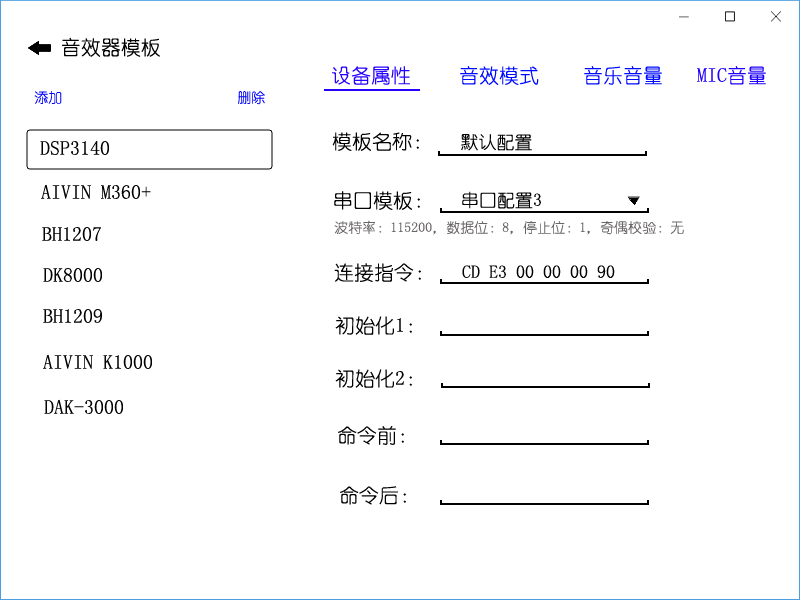
<style>
.page{position:relative;width:800px;height:600px;background:#ffffff}
.page>*{position:absolute;margin:0}
.t1{font:20px "YouYuan";color:#010101}
.t2{font:20px "YouYuan";color:#2501ff}
.t3{font:20px "YouYuan";color:#000cff}
.t4{font:20px "YouYuan";color:#1f01fd}
.t5{font:14px "YouYuan";color:#0000fe}
.t6{font:18px "YouYuan";color:#010101}
.t7{font:14px "YouYuan";color:#696666}
</style>
<div class="page">
<p class="t1" style="left:62px;top:37px;width:98px;height:20px">音效器模板</p>
<p class="t2" style="left:332px;top:66px;width:78px;height:19px">设备属性</p>
<p class="t3" style="left:460px;top:66px;width:79px;height:19px">音效模式</p>
<p class="t3" style="left:584px;top:66px;width:78px;height:19px">音乐音量</p>
<p class="t4" style="left:697px;top:66px;width:69px;height:19px">MIC音量</p>
<p class="t5" style="left:34px;top:91px;width:28px;height:13px">添加</p>
<p class="t5" style="left:238px;top:91px;width:27px;height:14px">删除</p>
<p class="t1" style="left:332px;top:132px;width:87px;height:19px">模板名称：</p>
<p class="t6" style="left:461px;top:134px;width:71px;height:17px">默认配置</p>
<p class="t1" style="left:40px;top:141px;width:69px;height:14px">DSP3140</p>
<p class="t1" style="left:41px;top:184px;width:110px;height:15px">AIVIN M360+</p>
<p class="t1" style="left:334px;top:191px;width:86px;height:19px">串口模板：</p>
<p class="t6" style="left:462px;top:191px;width:79px;height:18px">串口配置3</p>
<p class="t7" style="left:334px;top:220px;width:350px;height:15px">波特率：115200，数据位：8，停止位：1，奇偶校验：无</p>
<p class="t1" style="left:42px;top:227px;width:59px;height:14px">BH1207</p>
<p class="t1" style="left:43px;top:268px;width:59px;height:14px">DK8000</p>
<p class="t1" style="left:334px;top:263px;width:87px;height:19px">连接指令：</p>
<p class="t6" style="left:462px;top:265px;width:153px;height:13px">CD E3 00 00 00 90</p>
<p class="t1" style="left:43px;top:309px;width:59px;height:14px">BH1209</p>
<p class="t1" style="left:335px;top:316px;width:77px;height:19px">初始化1：</p>
<p class="t1" style="left:43px;top:354px;width:109px;height:15px">AIVIN K1000</p>
<p class="t1" style="left:335px;top:369px;width:77px;height:19px">初始化2：</p>
<p class="t1" style="left:44px;top:399px;width:79px;height:15px">DAK-3000</p>
<p class="t1" style="left:338px;top:426px;width:66px;height:19px">命令前：</p>
<p class="t1" style="left:340px;top:486px;width:66px;height:19px">命令后：</p>
</div>
